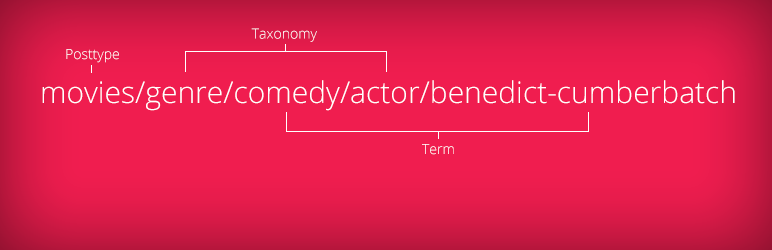
<style>
.page{position:relative;width:772px;height:250px;background:#f01d4f}
.page>*{position:absolute;margin:0}
.t1{font:14px "OpenSans-Light";color:#ffffff}
.t2{font:30px "OpenSans-Light";color:#ffffff}
</style>
<div class="page">
<p class="t1" style="left:251px;top:28px;width:66px;height:14px">Taxonomy</p>
<p class="t1" style="left:66px;top:49px;width:53px;height:14px">Posttype</p>
<p class="t2" style="left:42px;top:80px;width:693px;height:31px">movies/genre/comedy/actor/benedict-cumberbatch</p>
<p class="t1" style="left:422px;top:144px;width:32px;height:11px">Term</p>
</div>
